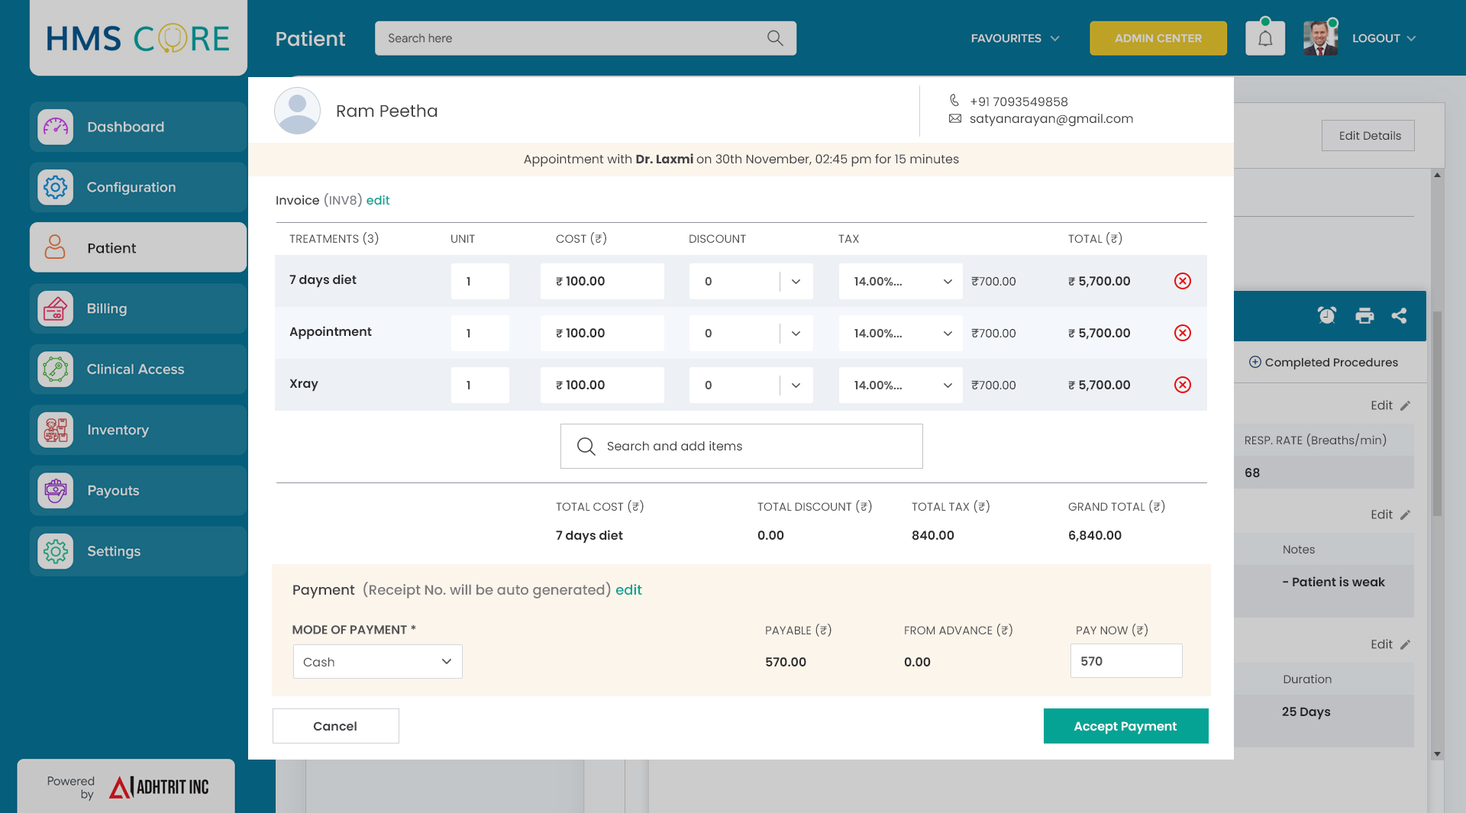
<style>
.page{position:relative;width:1466px;height:813px;background:#ffffff}
.page>*{position:absolute;margin:0}
.t1{font:12.2px/16.8px "Poppins-Regular";color:#414146}
.t2{font:16.8px "Poppins-Regular";color:#414146}
.t3{font:12.2px "Poppins-Regular";color:#414146}
.t4{font:12.2px "Poppins-Bold";color:#414146}
.t5{font:12.2px "Poppins-Medium";color:#414146}
.t6{font:12.2px "Poppins-Medium";color:#808089}
.t7{font:12.2px "Poppins-Medium";color:#05a394}
.t8{font:11.5px "Poppins-Regular";color:#515154}
.t9{font:12.2px "Poppins-SemiBold";color:#2c2c2f}
.t10{font:11.5px "Poppins-SemiBold";color:#515154}
.t11{font:11.5px "Poppins-Regular";color:#2c2c2f}
.t12{font:12.2px "Poppins-Medium";color:#515154}
.t13{font:13.7px "Poppins-Medium";color:#7b7b7f}
.t14{font:13.7px "Poppins-Medium";color:#414146}
.t15{font:13.7px "Poppins-Medium";color:#05a394}
.t16{font:12.2px "Poppins-SemiBold";color:#515154}
.t17{font:12.2px "Poppins-Regular";color:#515154}
.t18{font:12.2px "Poppins-SemiBold";color:#414146}
.t19{font:12.2px "Poppins-SemiBold";color:#ffffff}
</style>
<div class="page">
<p class="t1" style="left:970px;top:97px;width:163px;height:30px">+91 7093549858<br>satyanarayan@gmail.com</p>
<p class="t2" style="left:337px;top:104px;width:101px;height:14px">Ram Peetha</p>
<p class="t3" style="left:524px;top:153px;width:435px;height:14px">Appointment with <span class="t4">Dr. Laxmi </span>on 30th November, 02:45 pm for 15 minutes</p>
<p class="t5" style="left:276px;top:193px;width:114px;height:14px">Invoice <span class="t6">(INV8) </span><span class="t7">edit</span></p>
<p class="t8" style="left:289px;top:232px;width:90px;height:13px">TREATMENTS (3)</p>
<p class="t8" style="left:556px;top:232px;width:50px;height:13px">COST (₹)</p>
<p class="t8" style="left:1068px;top:232px;width:55px;height:13px">TOTAL (₹)</p>
<p class="t8" style="left:451px;top:234px;width:24px;height:9px">UNIT</p>
<p class="t8" style="left:690px;top:234px;width:56px;height:9px">DISCOUNT</p>
<p class="t8" style="left:838px;top:234px;width:21px;height:9px">TAX</p>
<p class="t9" style="left:289px;top:274px;width:68px;height:14px">7 days diet</p>
<p class="t10" style="left:467px;top:277px;width:3px;height:9px">1</p>
<p class="t9" style="left:556px;top:276px;width:49px;height:10px"><span class="t10">₹ </span>100.00</p>
<p class="t10" style="left:705px;top:276px;width:7px;height:10px">0</p>
<p class="t10" style="left:855px;top:276px;width:47px;height:10px">14.00%...</p>
<p class="t11" style="left:971px;top:276px;width:45px;height:10px"><span class="t12">₹</span>700.00</p>
<p class="t9" style="left:1068px;top:276px;width:62px;height:12px"><span class="t10">₹ </span>5,700.00</p>
<p class="t9" style="left:289px;top:326px;width:83px;height:14px">Appointment</p>
<p class="t10" style="left:467px;top:329px;width:3px;height:9px">1</p>
<p class="t9" style="left:556px;top:328px;width:49px;height:10px"><span class="t10">₹ </span>100.00</p>
<p class="t10" style="left:705px;top:328px;width:7px;height:10px">0</p>
<p class="t10" style="left:855px;top:328px;width:47px;height:10px">14.00%...</p>
<p class="t11" style="left:971px;top:328px;width:45px;height:10px"><span class="t12">₹</span>700.00</p>
<p class="t9" style="left:1068px;top:328px;width:62px;height:12px"><span class="t10">₹ </span>5,700.00</p>
<p class="t9" style="left:289px;top:379px;width:29px;height:13px">Xray</p>
<p class="t10" style="left:467px;top:381px;width:3px;height:8px">1</p>
<p class="t9" style="left:556px;top:380px;width:49px;height:10px"><span class="t10">₹ </span>100.00</p>
<p class="t10" style="left:705px;top:380px;width:7px;height:9px">0</p>
<p class="t10" style="left:855px;top:380px;width:47px;height:10px">14.00%...</p>
<p class="t11" style="left:971px;top:380px;width:45px;height:10px"><span class="t12">₹</span>700.00</p>
<p class="t9" style="left:1068px;top:380px;width:62px;height:12px"><span class="t10">₹ </span>5,700.00</p>
<p class="t3" style="left:608px;top:441px;width:134px;height:10px">Search and add items</p>
<p class="t8" style="left:556px;top:500px;width:88px;height:13px">TOTAL COST (₹)</p>
<p class="t8" style="left:758px;top:500px;width:114px;height:13px">TOTAL DISCOUNT (₹)</p>
<p class="t8" style="left:912px;top:500px;width:78px;height:13px">TOTAL TAX (₹)</p>
<p class="t8" style="left:1068px;top:500px;width:97px;height:13px">GRAND TOTAL (₹)</p>
<p class="t9" style="left:556px;top:530px;width:67px;height:14px">7 days diet</p>
<p class="t9" style="left:758px;top:531px;width:26px;height:9px">0.00</p>
<p class="t9" style="left:913px;top:531px;width:42px;height:10px">840.00</p>
<p class="t9" style="left:1069px;top:531px;width:53px;height:11px">6,840.00</p>
<p class="t13" style="left:293px;top:582px;width:349px;height:17px"><span class="t14">Payment  </span>(Receipt No. will be auto generated) <span class="t15">edit</span></p>
<p class="t16" style="left:292px;top:625px;width:124px;height:10px">MODE OF PAYMENT *</p>
<p class="t8" style="left:766px;top:624px;width:66px;height:13px">PAYABLE (₹)</p>
<p class="t8" style="left:905px;top:624px;width:108px;height:13px">FROM ADVANCE (₹)</p>
<p class="t8" style="left:1077px;top:624px;width:71px;height:13px">PAY NOW (₹)</p>
<p class="t17" style="left:303px;top:657px;width:31px;height:10px">Cash</p>
<p class="t9" style="left:766px;top:657px;width:40px;height:10px">570.00</p>
<p class="t9" style="left:904px;top:657px;width:27px;height:10px">0.00</p>
<p class="t16" style="left:1081px;top:657px;width:22px;height:9px">570</p>
<p class="t18" style="left:313px;top:722px;width:44px;height:10px">Cancel</p>
<p class="t19" style="left:1074px;top:722px;width:103px;height:13px">Accept Payment</p>
</div>
